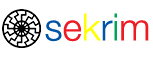
<style>
.page{position:relative;width:153px;height:59px;background:#ffffff}
.page>*{position:absolute;margin:0}
.t1{font:37.8px "HelveticaNeue-Light";color:#0054a6}
.t2{font:37.8px "HelveticaNeue-Light";color:#ed1c24}
.t3{font:37.8px "HelveticaNeue-Light";color:#ffff00}
.t4{font:37.8px "HelveticaNeue-Light";color:#00a651}
</style>
<div class="page">
<p class="t1" style="left:45px;top:13px;width:104px;height:29px">s<span class="t2">e</span><span class="t3">k</span>r<span class="t4">i</span><span class="t2">m</span></p>
</div>
